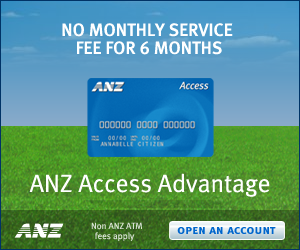
<style>
.page{position:relative;width:300px;height:250px}
.page>*{position:absolute;margin:0}
.t1{font:18px/18px "MetaMediumLF-Roman";color:#ffffff}
.t2{font:25px "MetaNormalLF-Roman";color:#ffffff}
.t3{font:9px/10px "MetaNormalLF-Roman";color:#d7e1d2}
.t4{font:13px "MetaBold-Caps";letter-spacing:0.01em;color:#0066cc}
</style>
<div class="page">
<p class="t1" style="left:62px;top:23px;width:171px;height:32px;text-align:center">NO MONTHLY SERVICE <br>FEE FOR 6 MONTHS</p>
<p class="t2" style="left:29px;top:173px;width:241px;height:24px">ANZ Access Advantage</p>
<p class="t3" style="left:91px;top:222px;width:51px;height:19px">Non ANZ ATM <br> fees apply</p>
<p class="t4" style="left:177px;top:227px;width:99px;height:7px">open an account</p>
</div>
